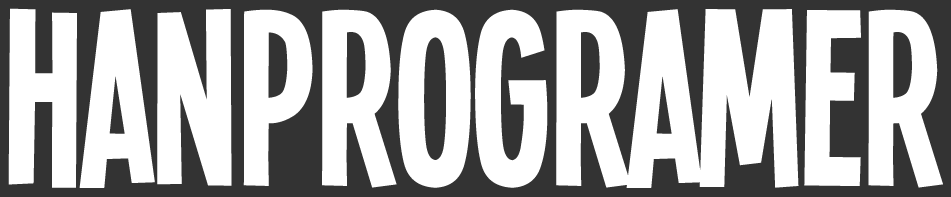
<style>
.page{position:relative;width:951px;height:197px;background:#ffffff}
.page>*{position:absolute;margin:0}
.t1{font:269px "SingleSleeve";color:#ffffff;text-transform:uppercase}
</style>
<div class="page">
<p class="t1" style="left:8px;top:8px;width:935px;height:180px">HANPROGRAMER</p>
</div>
